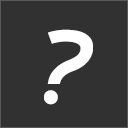
<style>
.page{position:relative;width:128px;height:128px;background:#313131}
.page>*{position:absolute;margin:0}
.t1{font:102px "Ashby-BoldItalic";color:#ffffff}
</style>
<div class="page">
<p class="t1" style="left:44px;top:29px;width:49px;height:76px">?</p>
</div>
